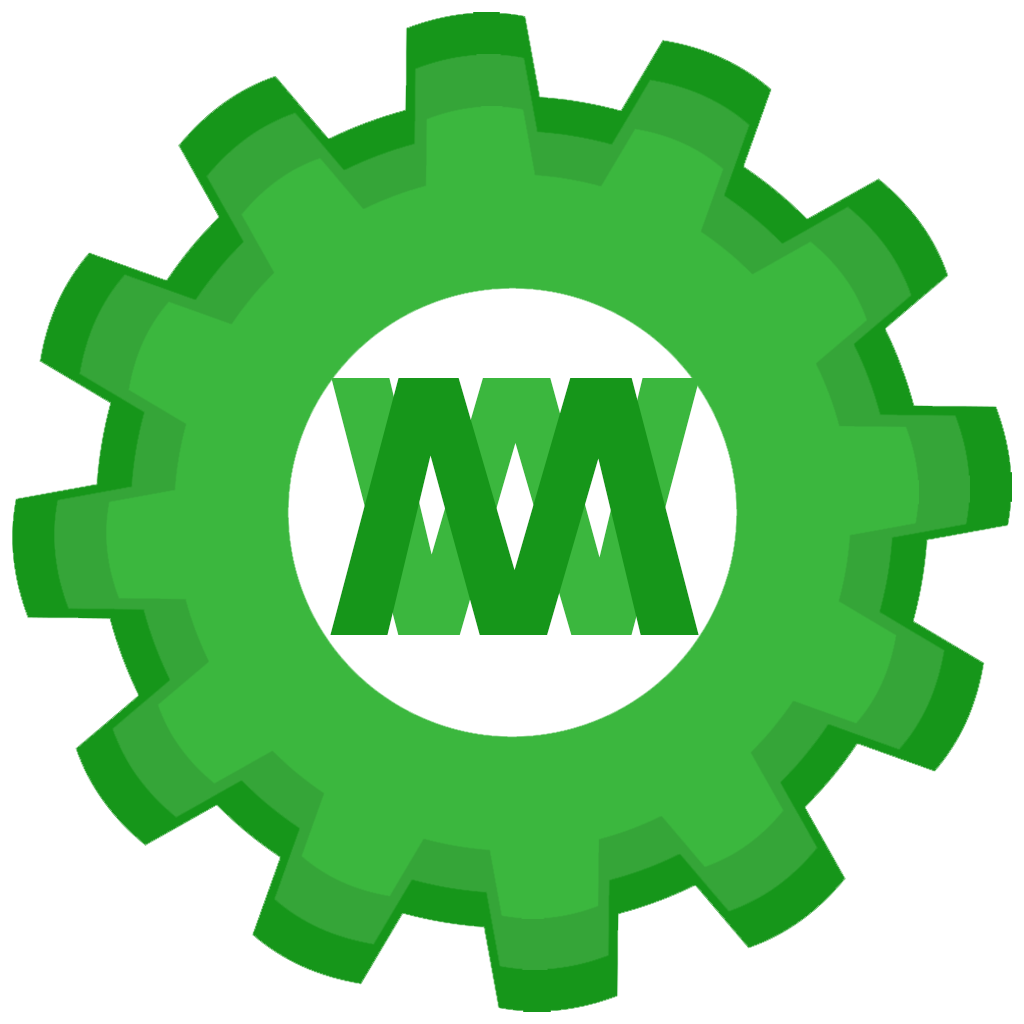
<style>
.page{position:relative;width:1024px;height:1024px;background:#ffffff}
.page>*{position:absolute;margin:0}
.t1{font:358.7px "Arial-BoldMT";color:#16961a;scale:1.09 1}
.t2{font:358.7px "Arial-BoldMT";scale:1.09 1}
</style>
<div class="page">
<p class="t1" style="left:330px;top:378px;width:369px;height:257px;rotate:180deg">W</p>
<p class="t2" style="left:331px;top:378px;width:369px;height:257px">W</p>
</div>
